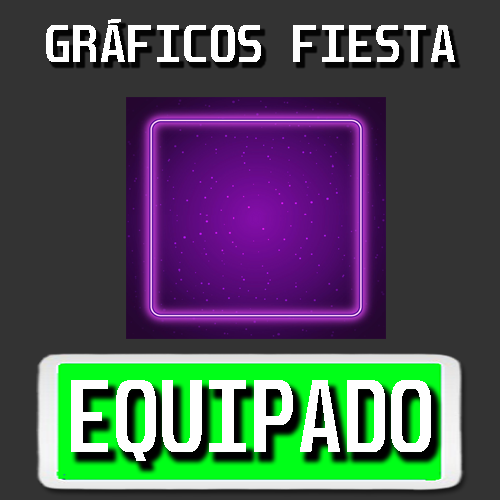
<style>
.page{position:relative;width:500px;height:500px;background:#333333}
.page>*{position:absolute;margin:0}
.t1{font:45px "Unispace-Bold";color:#ffffff}
.t2{font:88.1px "Unispace-Bold";color:#ffffff;scale:0.85 1}
.t3{font:87.7px "Unispace-Bold";color:#ffffff;scale:0.85 1}
</style>
<div class="page">
<p class="t1" style="left:46px;top:19px;width:409px;height:43px">GRÁFICOS FIESTA</p>
<p class="t2" style="left:71px;top:380px;width:360px;height:81px">EQUIPA<span class="t3">DO</span></p>
</div>
